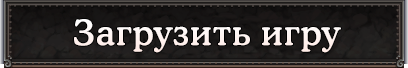
<style>
.page{position:relative;width:408px;height:68px}
.page>*{position:absolute;margin:0}
.t1{font:35px "CooperMediumCBT";letter-spacing:0.03em;color:#fff5f2}
</style>
<div class="page">
<p class="t1" style="left:74px;top:19px;width:267px;height:34px">Загрузить игру</p>
</div>
